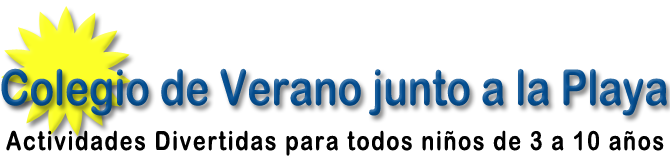
<style>
.page{position:relative;width:670px;height:168px;background:#ffffff}
.page>*{position:absolute;margin:0}
.t1{font:49.5px "ArialRoundedMTBold";color:#044f92;scale:0.82 1}
.t2{font:26.4px "ArialRoundedMTBold";letter-spacing:0.075em;color:#010101;scale:0.82 1}
</style>
<div class="page">
<p class="t1" style="left:1px;top:68px;width:666px;height:48px">Colegio de Verano junto a la Playa</p>
<p class="t2" style="left:6px;top:130px;width:658px;height:26px">Actividades Divertidas para todos niños de 3 a 10 años</p>
</div>
